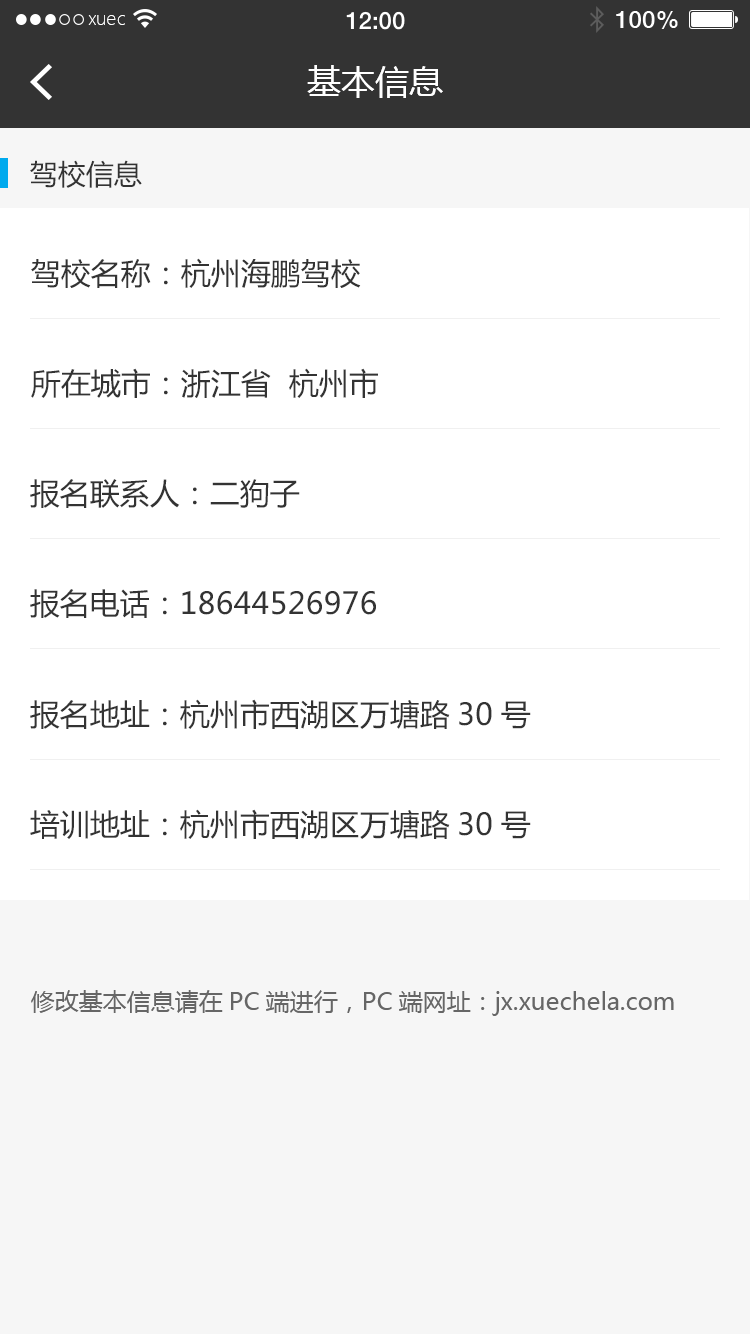
<style>
.page{position:relative;width:750px;height:1334px;background:#ffffff}
.page>*{position:absolute;margin:0}
.t1{font:18px "MicrosoftYaHeiLight";color:#ffffff}
.t2{font:34px "MicrosoftYaHei";color:#ffffff}
.t3{font:28px "MicrosoftYaHei";color:#333333}
.t4{font:30px "MicrosoftYaHei";color:#333333}
.t5{font:24px "MicrosoftYaHei";color:#666666}
</style>
<div class="page">
<p class="t1" style="left:88px;top:15px;width:37px;height:10px">xuec</p>
<p class="t2" style="left:307px;top:65px;width:136px;height:33px">基本信息</p>
<p class="t3" style="left:30px;top:160px;width:112px;height:28px">驾校信息</p>
<p class="t4" style="left:31px;top:258px;width:330px;height:30px">驾校名称：杭州海鹏驾校</p>
<p class="t4" style="left:31px;top:368px;width:347px;height:30px">所在城市：浙江省  杭州市</p>
<p class="t4" style="left:30px;top:479px;width:270px;height:29px">报名联系人：二狗子</p>
<p class="t4" style="left:30px;top:589px;width:346px;height:29px">报名电话：18644526976</p>
<p class="t4" style="left:30px;top:699px;width:501px;height:30px">报名地址：杭州市西湖区万塘路30号</p>
<p class="t4" style="left:30px;top:809px;width:501px;height:30px">培训地址：杭州市西湖区万塘路30号</p>
<p class="t5" style="left:31px;top:990px;width:643px;height:26px">修改基本信息请在PC端进行，PC端网址：jx.xuechela.com</p>
</div>
